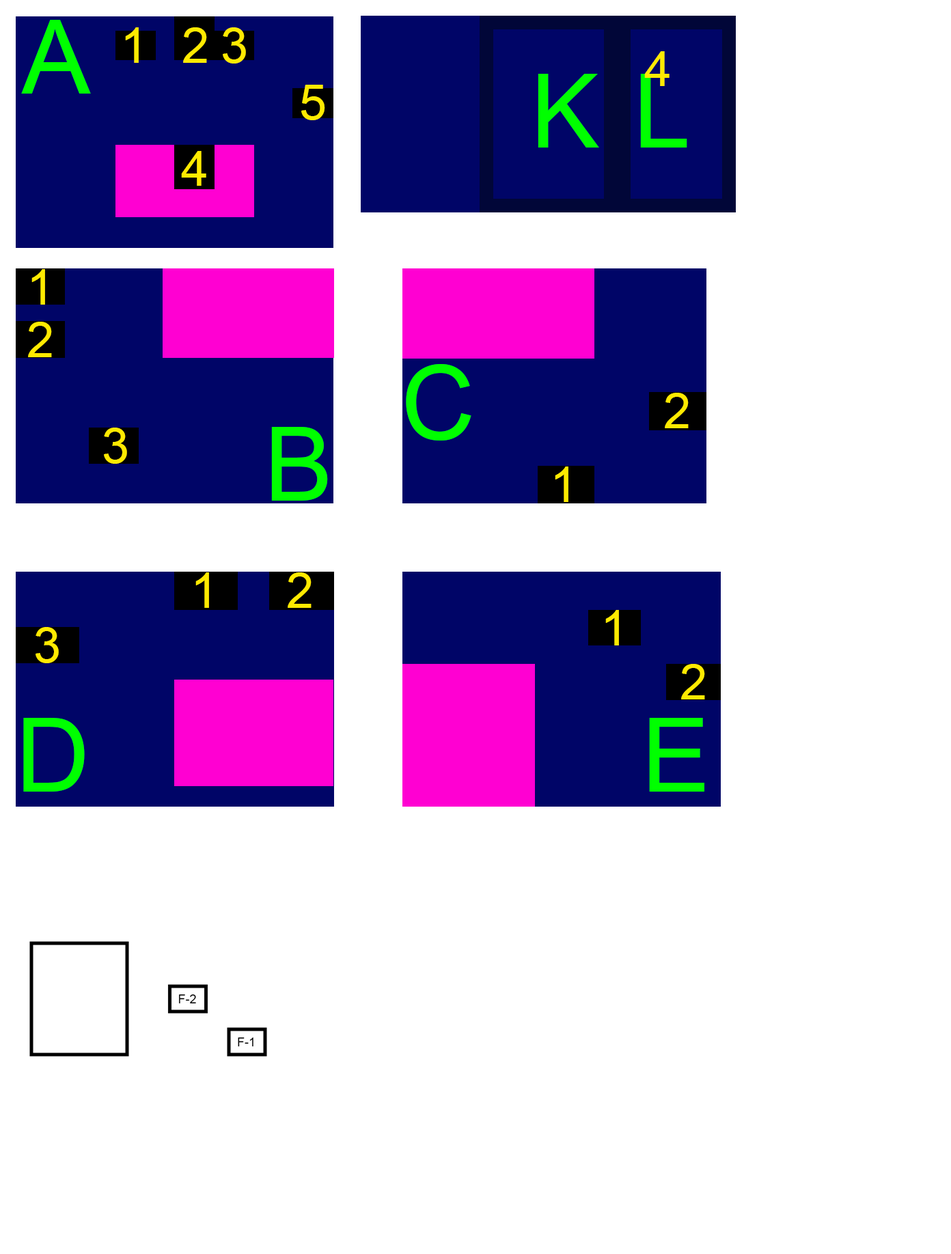
<style>
.page{position:relative;width:951px;height:1254px;background:#ffffff}
.page>*{position:absolute;margin:0}
.t1{font:102.5px "ArialMT";color:#00ff00}
.t2{font:49.2px "ArialMT";color:#ffea00}
</style>
<div class="page">
<p class="t1" style="left:21px;top:20px;width:70px;height:74px">A</p>
<p class="t2" style="left:125px;top:27px;width:14px;height:36px">1</p>
<p class="t2" style="left:183px;top:27px;width:24px;height:36px">2</p>
<p class="t2" style="left:223px;top:27px;width:23px;height:37px">3</p>
<p class="t2" style="left:644px;top:51px;width:25px;height:35px">4</p>
<p class="t1" style="left:538px;top:74px;width:61px;height:74px">K</p>
<p class="t1" style="left:640px;top:74px;width:47px;height:74px">L</p>
<p class="t2" style="left:301px;top:85px;width:24px;height:35px">5</p>
<p class="t2" style="left:181px;top:151px;width:25px;height:35px">4</p>
<p class="t2" style="left:31px;top:269px;width:14px;height:36px">1</p>
<p class="t2" style="left:28px;top:322px;width:24px;height:35px">2</p>
<p class="t1" style="left:406px;top:364px;width:65px;height:77px">C</p>
<p class="t2" style="left:665px;top:393px;width:24px;height:35px">2</p>
<p class="t2" style="left:104px;top:428px;width:23px;height:36px">3</p>
<p class="t1" style="left:271px;top:427px;width:57px;height:74px">B</p>
<p class="t2" style="left:555px;top:467px;width:13px;height:35px">1</p>
<p class="t2" style="left:195px;top:572px;width:14px;height:36px">1</p>
<p class="t2" style="left:288px;top:572px;width:23px;height:36px">2</p>
<p class="t2" style="left:605px;top:610px;width:14px;height:35px">1</p>
<p class="t2" style="left:36px;top:627px;width:23px;height:36px">3</p>
<p class="t2" style="left:681px;top:664px;width:24px;height:35px">2</p>
<p class="t1" style="left:23px;top:718px;width:62px;height:74px">D</p>
<p class="t1" style="left:649px;top:718px;width:55px;height:74px">E</p>
</div>
